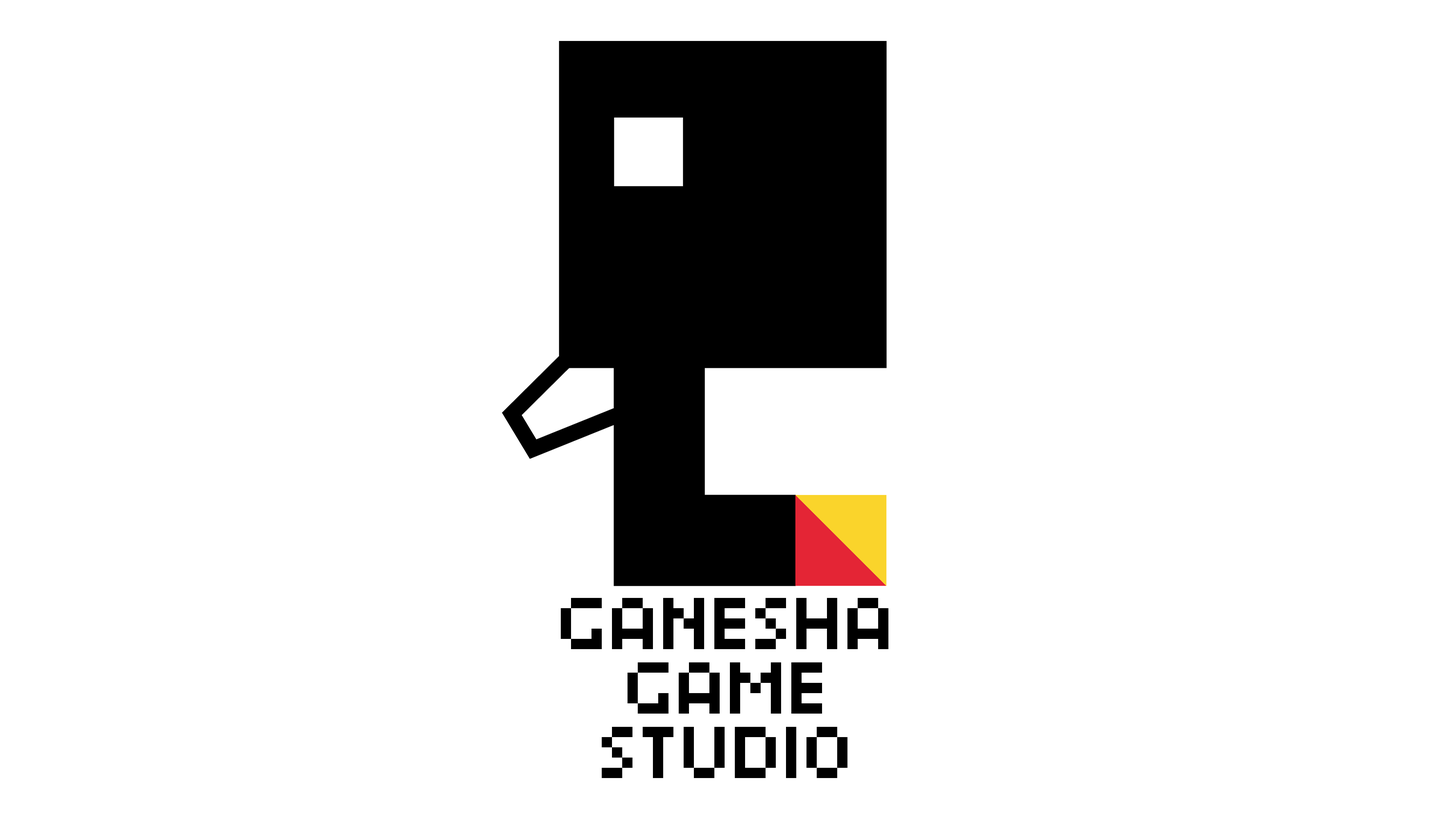
<style>
.page{position:relative;width:1456px;height:819px;background:#ffffff}
.page>*{position:absolute;margin:0}
.t1{font:61.4px/64.5px "Berkelium1541";color:#000000}
</style>
<div class="page">
<p class="t1" style="left:561px;top:598px;width:328px;height:180px;text-align:center">GANESHA<br>GAME<br>STUDIO</p>
</div>
